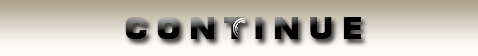
<style>
.page{position:relative;width:478px;height:56px}
.page>*{position:absolute;margin:0}
.t1{font:30px "Moire-ExtraBold"}
</style>
<div class="page">
<p class="t1" style="left:125px;top:17px;width:236px;height:22px">C O N T I N U E</p>
</div>
